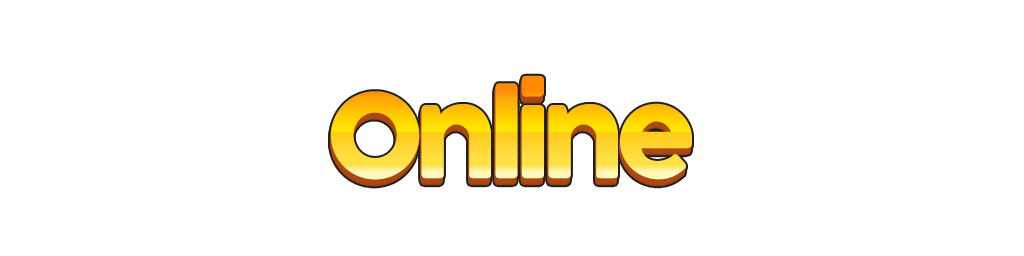
<style>
.page{position:relative;width:1024px;height:256px;background:#ffffff}
.page>*{position:absolute;margin:0}
.t1{font:115px "Cocogoose";letter-spacing:-0.08em}
</style>
<div class="page">
<p class="t1" style="left:331px;top:75px;width:361px;height:105px">Online</p>
</div>
